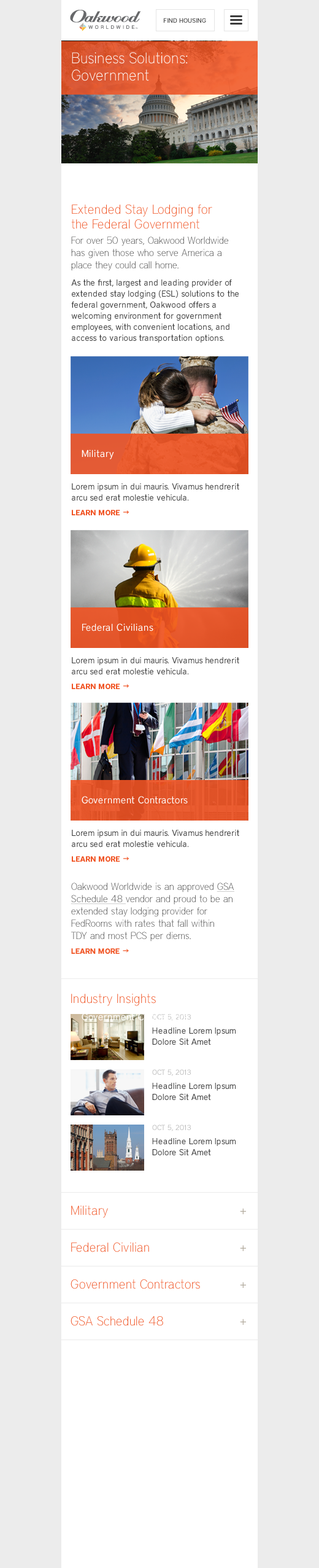
<style>
.page{position:relative;width:319px;height:1568px;background:#ffffff}
.page>*{position:absolute;margin:0}
.t1{font:6.1px "District-Medium";color:#3b3b3b;text-transform:uppercase}
.t2{font:15.4px/17.2px "District-Thin";color:#ffffff}
.t3{font:9.8px/12.3px "District-Thin";color:#3b3b3b}
.t4{font:12.9px/14.7px "District-Thin";color:#f05323}
.t5{font:8.6px/11.1px "District-Book";color:#3b3b3b}
.t6{font:9.8px "District-Book";color:#ffffff}
.t7{font:7.4px/14.7px "District-Bold";color:#f05323;text-transform:uppercase}
.t8{font:11.1px/14.7px "LucidaConsole";color:#f05323;text-transform:uppercase}
.t9{font:9.8px/12.3px "District-Thin";color:#3b3b3b;text-decoration:underline}
.t10{font:12.9px "District-Thin";color:#f05323}
.t11{font:7.4px/14.7px "District-Book";color:#bbbbbb;text-transform:uppercase}
.t12{font:12.9px/36.9px "District-Thin";color:#f05323}
.t13{font:11.1px/36.9px "District-Book";color:#b4ada0;text-transform:uppercase}
</style>
<div class="page">
<p class="t1" style="left:164px;top:18px;width:42px;height:5px">Find Housing</p>
<p class="t2" style="left:72px;top:52px;width:116px;height:29px">Business Solutions:<br>Government</p>
<p class="t3" style="left:71px;top:205px;width:157px;height:66px"><span class="t4">Extended Stay Lodging for <br>the Federal Government<br></span>For over 50 years, Oakwood Worldwide <br>has given those who serve America a <br>place they could call home.</p>
<p class="t5" style="left:71px;top:279px;width:168px;height:64px">As the first, largest and leading provider of extended stay lodging (ESL) solutions to the federal government, Oakwood offers a welcoming environment for government employees, with convenient locations, and access to various transportation options.</p>
<p class="t6" style="left:82px;top:450px;width:32px;height:9px">Military</p>
<p class="t5" style="left:72px;top:483px;width:168px;height:32px">Lorem ipsum in dui mauris. Vivamus hendrerit arcu sed erat molestie vehicula.<br><span class="t7">Learn More </span><span class="t8">→</span></p>
<p class="t6" style="left:82px;top:623px;width:72px;height:8px">Federal Civilians</p>
<p class="t5" style="left:72px;top:657px;width:168px;height:32px">Lorem ipsum in dui mauris. Vivamus hendrerit arcu sed erat molestie vehicula.<br><span class="t7">Learn More </span><span class="t8">→</span></p>
<p class="t6" style="left:82px;top:796px;width:106px;height:8px">Government Contractors</p>
<p class="t5" style="left:72px;top:830px;width:168px;height:32px">Lorem ipsum in dui mauris. Vivamus hendrerit arcu sed erat molestie vehicula.<br><span class="t7">Learn More </span><span class="t8">→</span></p>
<p class="t3" style="left:71px;top:883px;width:164px;height:71px">Oakwood Worldwide is an approved <span class="t9">GSA<br>Schedule 48 </span>vendor and proud to be an <br>extended stay lodging provider for <br>FedRooms with rates that fall within <br>TDY and most PCS per diems.<br><span class="t7">Learn More </span><span class="t8">→</span></p>
<p class="t10" style="left:71px;top:994px;width:85px;height:12px">Industry Insights</p>
<p class="t5" style="left:152px;top:1014px;width:84px;height:31px"><span class="t11">Oct 5, 2013<br></span>Headline Lorem Ipsum Dolore Sit Amet</p>
<p class="t5" style="left:152px;top:1069px;width:84px;height:31px"><span class="t11">Oct 5, 2013<br></span>Headline Lorem Ipsum Dolore Sit Amet</p>
<p class="t5" style="left:152px;top:1125px;width:84px;height:30px"><span class="t11">Oct 5, 2013<br></span>Headline Lorem Ipsum Dolore Sit Amet</p>
<p class="t12" style="left:71px;top:1206px;width:129px;height:120px">Military<br>Federal Civilian<br>Government Contractors<br>GSA Schedule 48</p>
<p class="t13" style="left:240px;top:1208px;width:6px;height:117px;text-align:right">+<br>+<br>+<br>+</p>
</div>
